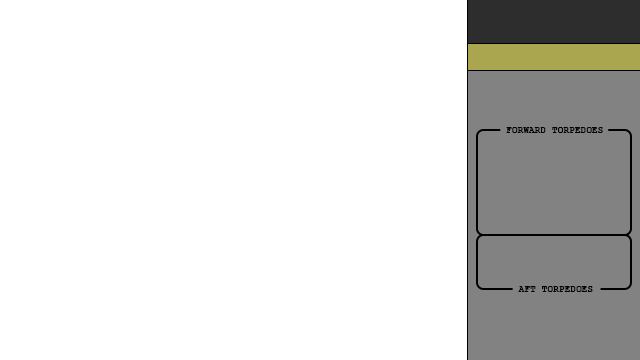
<style>
.page{position:relative;width:640px;height:360px;background:#ffffff}
.page>*{position:absolute;margin:0}
.t1{font:9.3px "CourierNewPS-BoldMT";color:#000000}
</style>
<div class="page">
<p class="t1" style="left:506px;top:127px;width:97px;height:6px">FORWARD TORPEDOES</p>
<p class="t1" style="left:518px;top:286px;width:75px;height:6px">AFT TORPEDOES</p>
</div>
